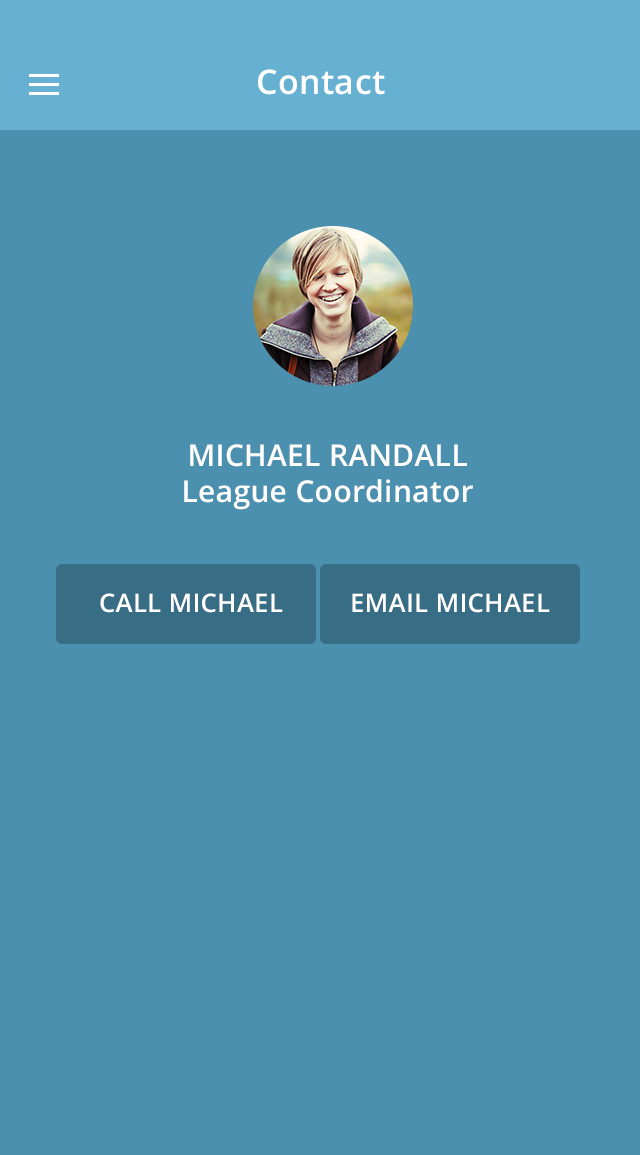
<style>
.page{position:relative;width:640px;height:1155px;background:#4b90ae}
.page>*{position:absolute;margin:0}
.t1{font:34px "OpenSans-Semibold";letter-spacing:0.01em;color:#ffffff}
.t2{font:30px/36px "OpenSans-Semibold";letter-spacing:0.01em;color:#ffffff}
.t3{font:30px/36px "OpenSans-Semibold";letter-spacing:0.01em;color:#ffffff;text-transform:uppercase}
.t4{font:25.5px "OpenSans-Semibold";letter-spacing:0.01em;color:#ffffff;text-transform:uppercase}
</style>
<div class="page">
<p class="t1" style="left:258px;top:69px;width:127px;height:26px">Contact</p>
<p class="t2" style="left:184px;top:444px;width:289px;height:66px;text-align:center"><span class="t3">Michael Randall<br></span>League Coordinator</p>
<p class="t4" style="left:100px;top:593px;width:183px;height:20px">Call MICHAEL</p>
<p class="t4" style="left:352px;top:593px;width:198px;height:20px">EMAIL MICHAEL</p>
</div>
